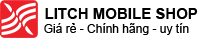
<style>
.page{position:relative;width:219px;height:38px;background:#ffffff}
.page>*{position:absolute;margin:0}
.t1{font:15px "Arial-BoldMT";color:#000000}
.t2{font:12px "ArialMT";color:#000000}
</style>
<div class="page">
<p class="t1" style="left:45px;top:8px;width:153px;height:11px">LITCH MOBILE SHOP</p>
<p class="t2" style="left:44px;top:23px;width:145px;height:12px">Giá rẻ - Chính hãng - uy tín</p>
</div>
